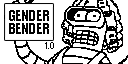
<style>
.page{position:relative;width:128px;height:64px;background:#ffffff}
.page>*{position:absolute;margin:0}
.t1{font:13.9px/12.2px "Impact";color:#000000;text-transform:uppercase}
.t2{font:8px "Standard0757";color:#000000;text-transform:uppercase;scale:0.96 1}
</style>
<div class="page">
<p class="t1" style="left:9px;top:10px;width:40px;height:24px;text-align:center">GENDER<br>BENDER</p>
<p class="t2" style="left:45px;top:42px;width:9px;height:7px">1.0</p>
</div>
